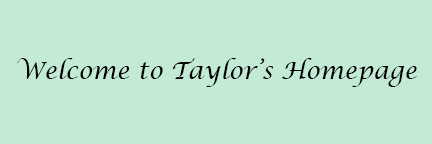
<style>
.page{position:relative;width:432px;height:144px;background:#c2ead4}
.page>*{position:absolute;margin:0}
.t1{font:24px "LucidaCalligraphy-Italic";color:#000000}
</style>
<div class="page">
<p class="t1" style="left:17px;top:58px;width:400px;height:29px">Welcome to Taylor’s Homepage</p>
</div>
